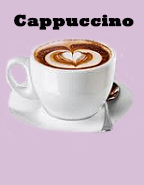
<style>
.page{position:relative;width:144px;height:185px;background:#d8bfd8}
.page>*{position:absolute;margin:0}
.t1{font:16px "Rockwell-ExtraBold";color:#030303;font-weight:bold}
</style>
<div class="page">
<p class="t1" style="left:14px;top:14px;width:120px;height:16px">Cappuccino</p>
</div>
